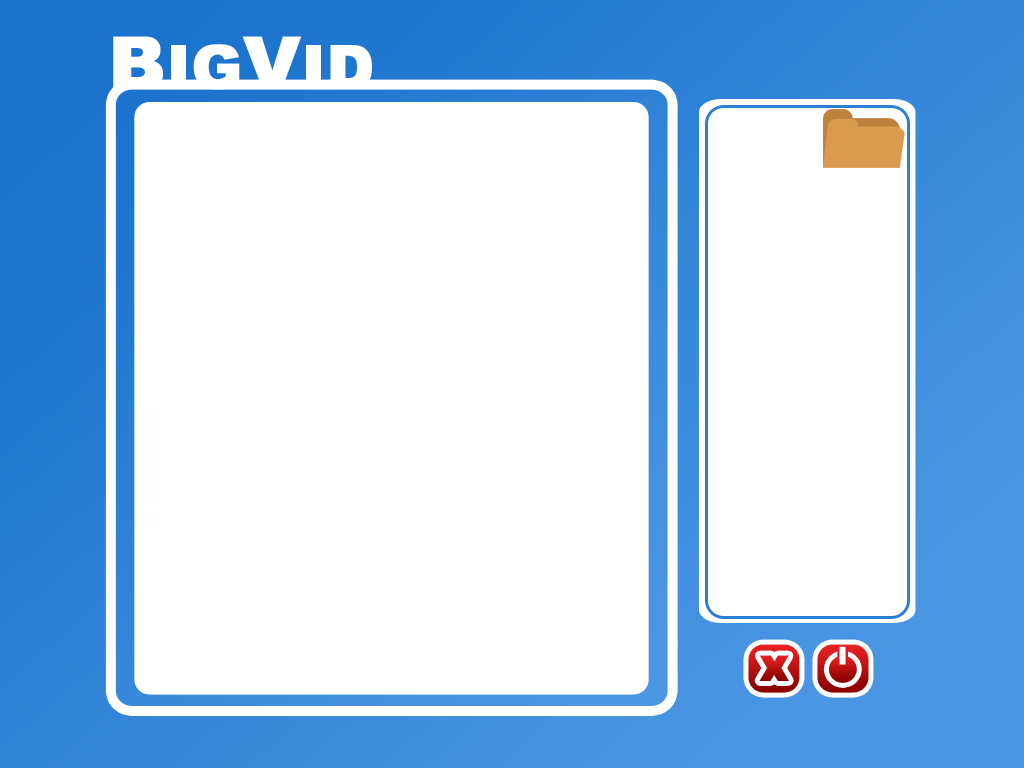
<style>
.page{position:relative;width:1024px;height:768px;background:#ffffff}
.page>*{position:absolute;margin:0}
.t1{font:60px "Arial-Black";color:#ffffff;font-weight:bold}
.t2{font:72px "Arial-Black";color:#ffffff;font-weight:bold}
</style>
<div class="page">
<p class="t1" style="left:113px;top:36px;width:259px;height:54px"><span class="t2">B</span>IG<span class="t2">V</span>ID</p>
</div>
